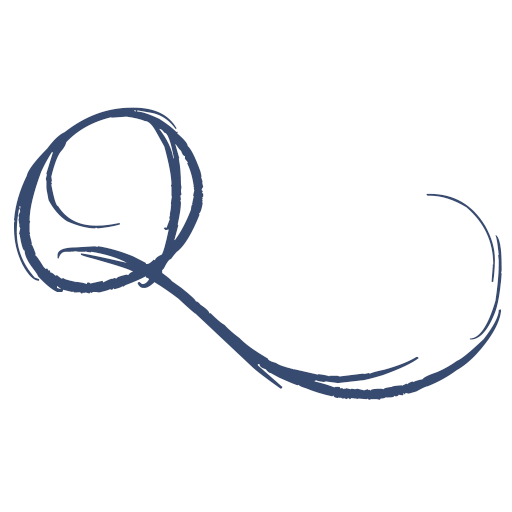
<style>
.page{position:relative;width:512px;height:512px;background:#ffffff}
.page>*{position:absolute;margin:0}
.t1{font:374.2px "Dunno";color:#374b70}
</style>
<div class="page">
<p class="t1" style="left:14px;top:107px;width:488px;height:293px">Q</p>
</div>
